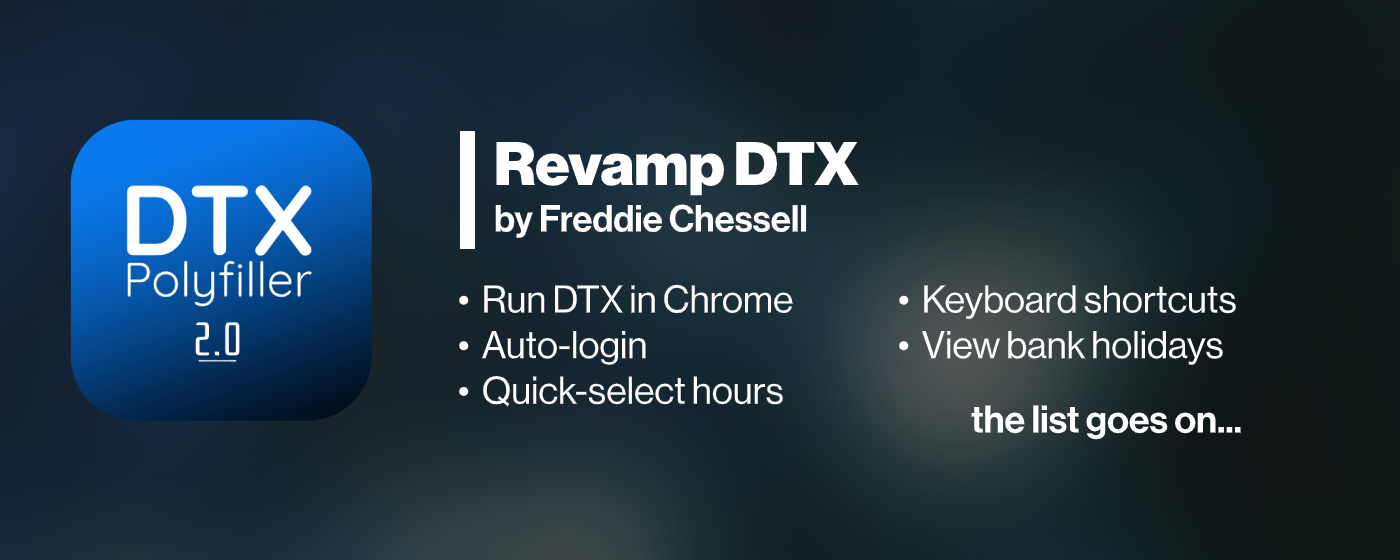
<style>
.page{position:relative;width:1400px;height:560px}
.page>*{position:absolute;margin:0}
.t1{font:60px "NeueHaasDisplay-Black";color:#ffffff}
.t2{font:37px "NeueHaasDisplay-Mediu";color:#ffffff}
.t3{font:38px "NeueHaasDisplay-Roman";color:#ffffff}
.t4{font:38px "NeueHaasDisplay-Mediu";color:#ffffff}
</style>
<div class="page">
<p class="t1" style="left:496px;top:142px;width:363px;height:54px">Revamp DTX</p>
<p class="t2" style="left:495px;top:204px;width:312px;height:34px">by Freddie Chessell</p>
<p class="t3" style="left:459px;top:284px;width:334px;height:123px">•  Run DTX in Chrome<br>•  Auto-login<br>•  Quick-select hours</p>
<p class="t3" style="left:899px;top:285px;width:337px;height:80px">•  Keyboard shortcuts<br>•  View bank holidays</p>
<p class="t4" style="left:971px;top:405px;width:270px;height:35px">the list goes on...</p>
</div>
